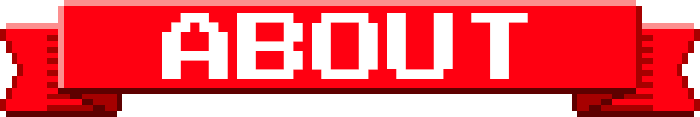
<style>
.page{position:relative;width:700px;height:117px;background:#ff0011}
.page>*{position:absolute;margin:0}
.t1{font:75px "PressStart2P-Regular";color:#ffffff}
</style>
<div class="page">
<p class="t1" style="left:162px;top:13px;width:366px;height:66px">ABOUT</p>
</div>
